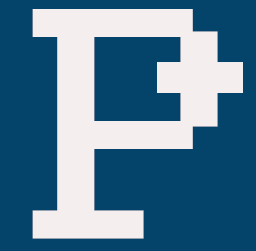
<style>
.page{position:relative;width:256px;height:251px;background:#04436a}
.page>*{position:absolute;margin:0}
.t1{font:358.3px "Courier";letter-spacing:0.2em;color:#f4eeee;text-transform:uppercase;font-weight:bold;scale:1.1 1}
</style>
<div class="page">
<p class="t1" style="left:32px;top:9px;width:186px;height:230px">P</p>
</div>
